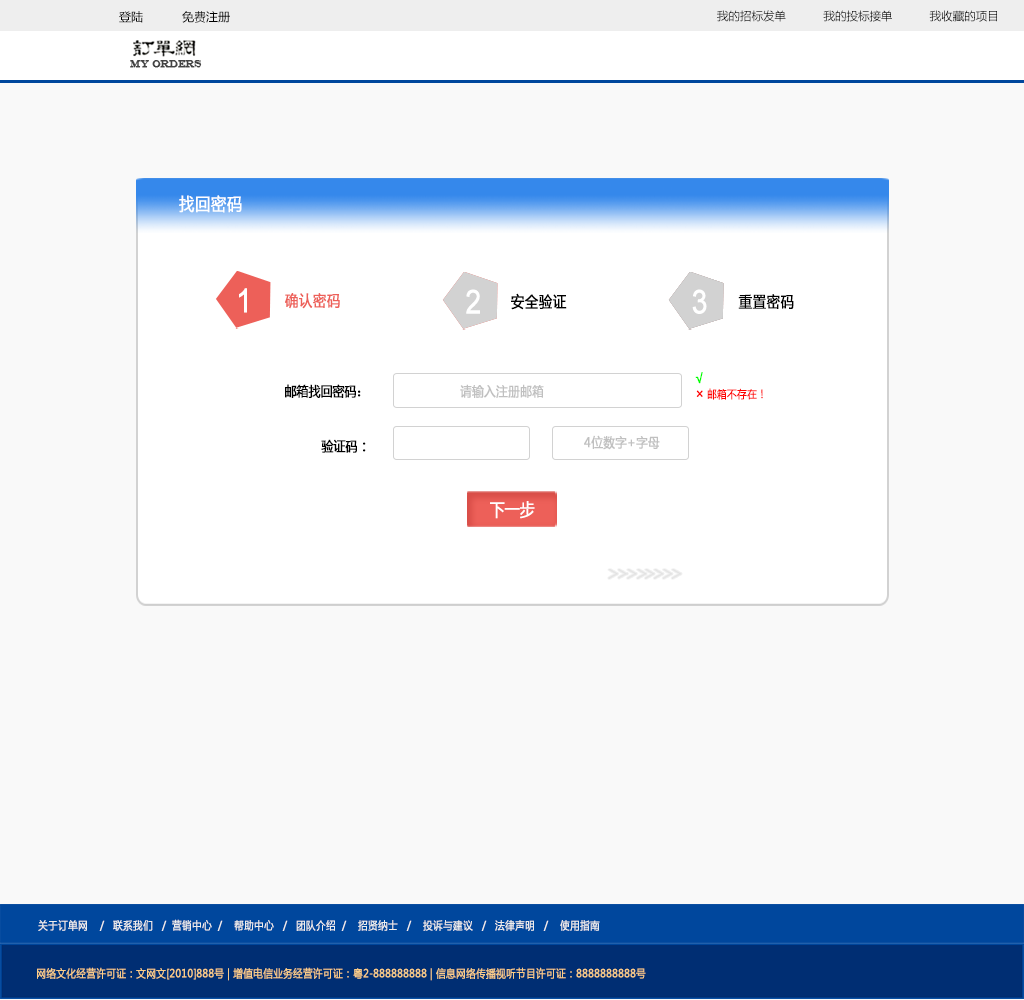
<style>
.page{position:relative;width:1024px;height:1000px;background:#f9f9f9}
.page>*{position:absolute;margin:0}
.t1{font:12px "MicrosoftYaHei";color:#000000}
.t2{font:11.5px "MicrosoftYaHei";color:#000000}
.t3{font:9.9px "EngraversMT";color:#434343;font-variant:small-caps;font-weight:bold;scale:0.86 1}
.t4{font:17.6px "MicrosoftYaHei";color:#ffffff;font-variant:small-caps;font-weight:bold;scale:0.86 1}
.t5{font:33px "ArialMT";color:#ffffff;font-variant:small-caps;font-weight:bold;scale:0.86 1}
.t6{font:15.4px "MicrosoftYaHei";color:#ed6059;font-variant:small-caps;font-weight:bold;scale:0.86 1}
.t7{font:15.4px "MicrosoftYaHei";color:#000000;font-variant:small-caps;font-weight:bold;scale:0.86 1}
.t8{font:11px "MicrosoftYaHei";color:#ff0000;font-variant:small-caps;font-weight:bold;scale:0.86 1}
.t9{font:13.8px "MicrosoftYaHei";color:#00ff00;font-variant:small-caps;font-weight:bold;scale:0.86 1}
.t10{font:13.8px "MicrosoftYaHei";color:#ff0000;font-variant:small-caps;font-weight:bold;scale:0.86 1}
.t11{font:13.8px "MicrosoftYaHei";color:#000000;font-variant:small-caps;font-weight:bold;scale:0.86 1}
.t12{font:15.4px "SimSun";color:#000000;font-variant:small-caps;font-weight:bold;scale:0.86 1}
.t13{font:13.2px "MicrosoftYaHei";color:#c0c0c0;font-variant:small-caps;font-weight:bold;scale:0.86 1}
.t14{font:17.4px "MicrosoftYaHei";color:#ffffff;font-variant:small-caps;font-weight:bold;scale:0.86 1}
.t15{font:11px "MicrosoftYaHei";color:#eeeeee;font-variant:small-caps;font-weight:bold;scale:0.86 1}
.t16{font:15.4px "STXihei";color:#eeeeee;font-variant:small-caps;font-weight:bold;scale:0.86 1}
.t17{font:11px "MicrosoftYaHei";color:#facd89;font-variant:small-caps;font-weight:bold;scale:0.87 1}
.t18{font:11px "MicrosoftYaHei";color:#eeeeee;font-variant:small-caps;font-weight:bold;scale:0.87 1}
</style>
<div class="page">
<p class="t1" style="left:119px;top:11px;width:111px;height:12px">登陆           免费注册</p>
<p class="t2" style="left:717px;top:10px;width:280px;height:12px">我的招标发单           我的投标接单           我收藏的项目</p>
<p class="t3" style="left:130px;top:60px;width:72px;height:8px">MY ORDERS</p>
<p class="t4" style="left:179px;top:195px;width:63px;height:18px">找回密码</p>
<p class="t5" style="left:239px;top:288px;width:8px;height:25px">1</p>
<p class="t6" style="left:285px;top:293px;width:55px;height:16px">确认密码</p>
<p class="t5" style="left:466px;top:289px;width:14px;height:25px">2</p>
<p class="t7" style="left:511px;top:293px;width:56px;height:17px">安全验证</p>
<p class="t5" style="left:692px;top:289px;width:15px;height:25px">3</p>
<p class="t7" style="left:738px;top:294px;width:56px;height:15px">重置密码</p>
<p class="t8" style="left:695px;top:372px;width:68px;height:28px"><span class="t9">√<br></span><span class="t10">×</span> 邮箱不存在！</p>
<p class="t11" style="left:285px;top:384px;width:76px;height:14px">邮箱找回密码<span class="t12">：</span></p>
<p class="t13" style="left:460px;top:384px;width:84px;height:14px">请输入注册邮箱</p>
<p class="t13" style="left:584px;top:435px;width:76px;height:15px">4位数字+字母</p>
<p class="t11" style="left:321px;top:439px;width:45px;height:14px">验证码<span class="t7">：</span></p>
<p class="t14" style="left:490px;top:501px;width:45px;height:18px">下一步</p>
<p class="t15" style="left:38px;top:919px;width:562px;height:12px"><span class="t16"><br><br></span>关于订单网    /   联系我们   /  营销中心  /    帮助中心   /   团队介绍  /    招贤纳士   /    投诉与建议   /   法律声明   /    使用指南</p>
<p class="t17" style="left:37px;top:967px;width:609px;height:14px"><span class="t18"> </span>网络文化经营许可证：文网文[2010]888号 | 增值电信业务经营许可证：粤2-888888888 | 信息网络传播视听节目许可证：8888888888号</p>
</div>
